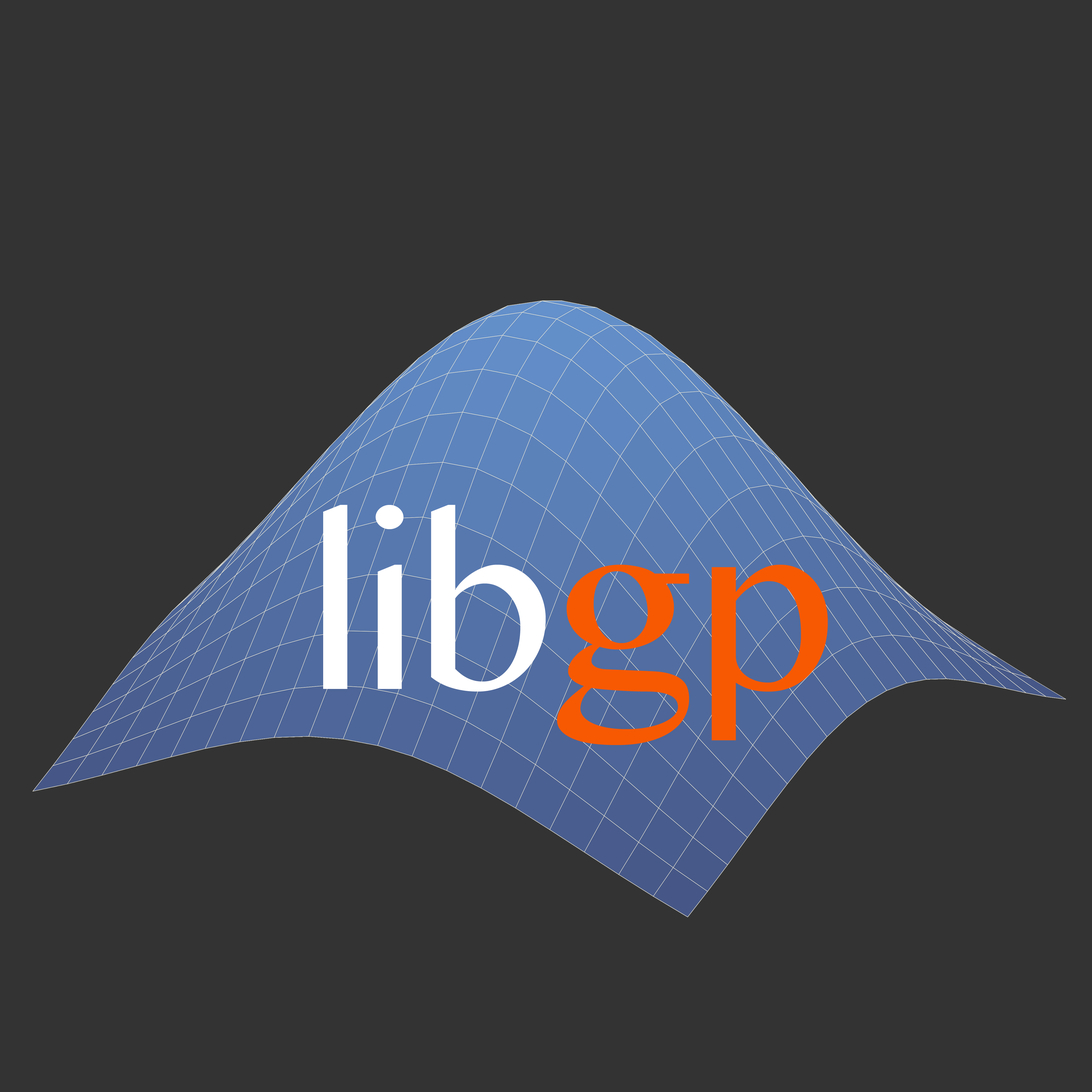
<style>
.page{position:relative;width:1092px;height:1092px;background:#333333}
.page>*{position:absolute;margin:0}
.t1{font:232.1px "MalayalamMN";color:#ffffff}
.t2{font:232.1px "MalayalamMN";color:#f75902}
</style>
<div class="page">
<p class="t1" style="left:323px;top:505px;width:505px;height:240px">lib<span class="t2">gp</span></p>
</div>
